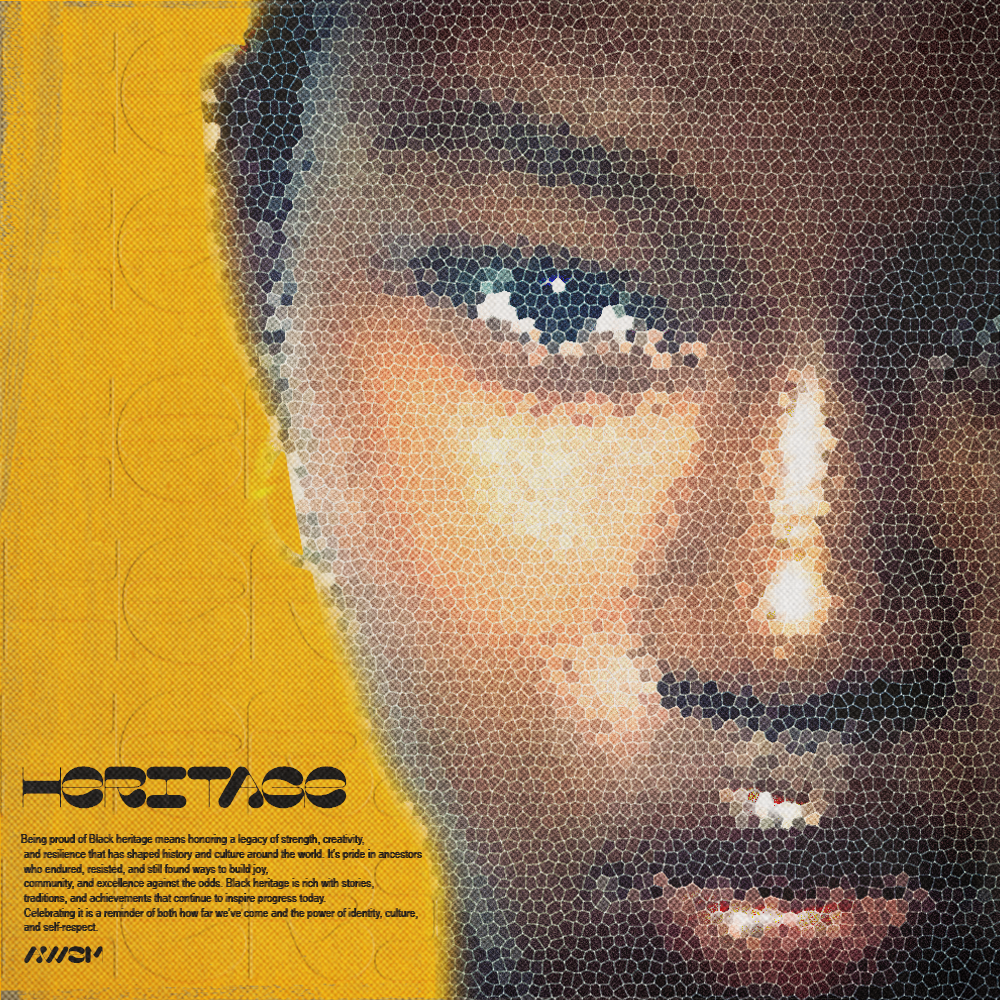
<style>
.page{position:relative;width:1000px;height:1000px}
.page>*{position:absolute;margin:0}
.t1{font:61.8px "Capsule-Regular";color:#24221f}
.t2{font:12.2px "ArialNarrow";color:#23201e}
.t3{font:25px "Capsule-Regular";color:#24211f}
</style>
<div class="page">
<p class="t1" style="left:22px;top:766px;width:325px;height:43px">heritage</p>
<p class="t2" style="left:22px;top:834px;width:401px;height:99px">Being proud of Black heritage means honoring a legacy of strength, creativity,<br> and resilience that has shaped history and culture around the world. It’s pride in ancestors<br> who endured, resisted, and still found ways to build joy,<br> community, and excellence against the odds. Black heritage is rich with stories,<br> traditions, and achievements that continue to inspire progress today.<br> Celebrating it is a reminder of both how far we’ve come and the power of identity, culture,<br> and self-respect.</p>
<p class="t3" style="left:24px;top:946px;width:79px;height:18px">awsm</p>
</div>
